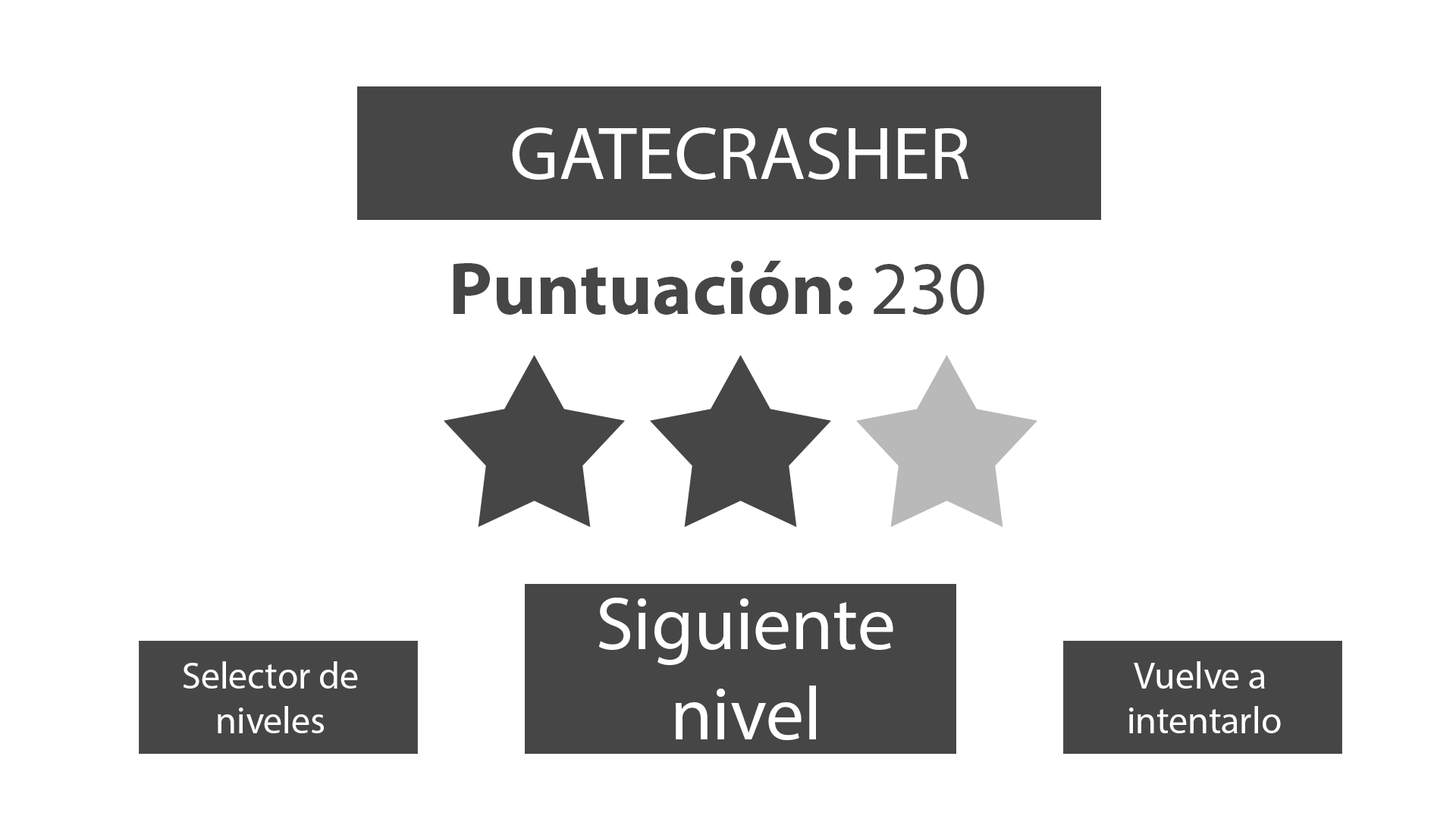
<style>
.page{position:relative;width:1456px;height:819px;background:#ffffff}
.page>*{position:absolute;margin:0}
.t1{font:75.8px "MyriadPro-Regular";color:#ffffff}
.t2{font:75.8px "MyriadPro-Bold";color:#464646}
.t3{font:75.8px "MyriadPro-Regular";color:#464646}
.t4{font:9.1px "MyriadPro-Regular";color:#ffffff}
</style>
<div class="page">
<p class="t1" style="left:512px;top:127px;width:457px;height:53px">GATECRASHER</p>
<p class="t2" style="left:453px;top:260px;width:531px;height:55px">Puntuación: <span class="t3">230</span></p>
<p class="t1" style="left:598px;top:598px;width:295px;height:142px;text-align:center">Siguiente<br>nivel</p>
<p class="t4" style="left:183px;top:661px;width:175px;height:72px;text-align:center">Selector de<br>niveles</p>
<p class="t4" style="left:1129px;top:661px;width:152px;height:72px;text-align:center">Vuelve a<br> intentarlo</p>
</div>
